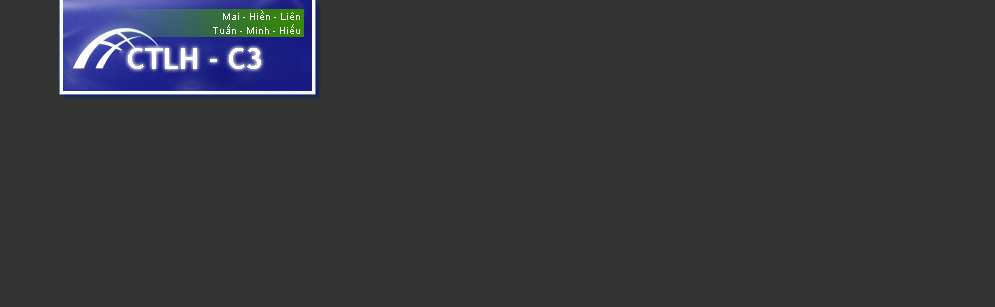
<style>
.page{position:relative;width:995px;height:307px;background:#333333}
.page>*{position:absolute;margin:0}
.t1{font:10px/14px "ArialMT";color:#fffffd}
</style>
<div class="page">
<p class="t1" style="left:213px;top:10px;width:87px;height:24px;text-align:right">Mai - Hiền - Liên<br>Tuấn - Minh - Hiếu</p>
</div>
